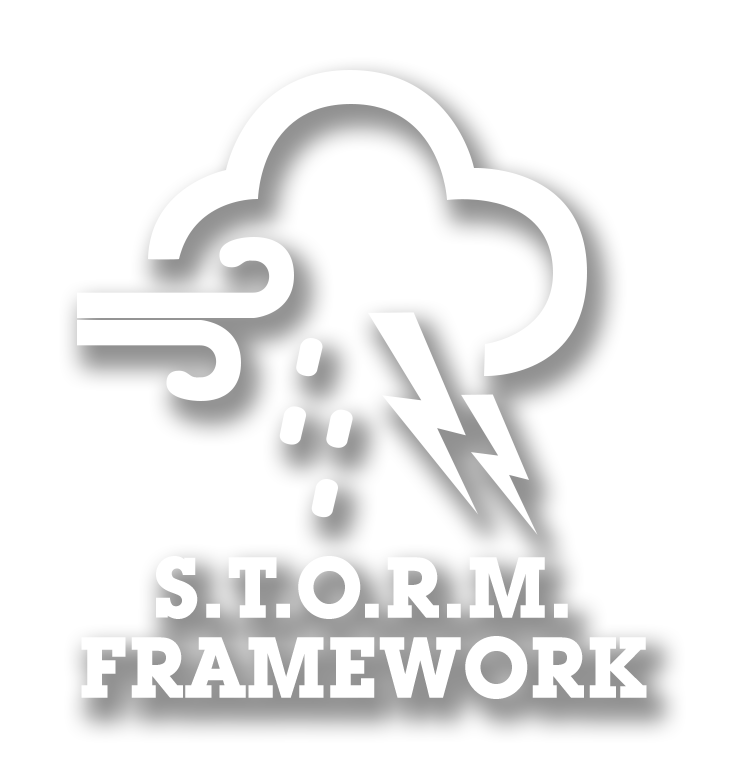
<style>
.page{position:relative;width:745px;height:781px;background:#ffffff}
.page>*{position:absolute;margin:0}
.t1{font:85px/80px "LubalinGraphITCbyBT-Bold";color:#ffffff;text-transform:uppercase}
</style>
<div class="page">
<p class="t1" style="left:81px;top:556px;width:566px;height:143px;text-align:center">S.T.O.R.M.<br>Framework</p>
</div>
